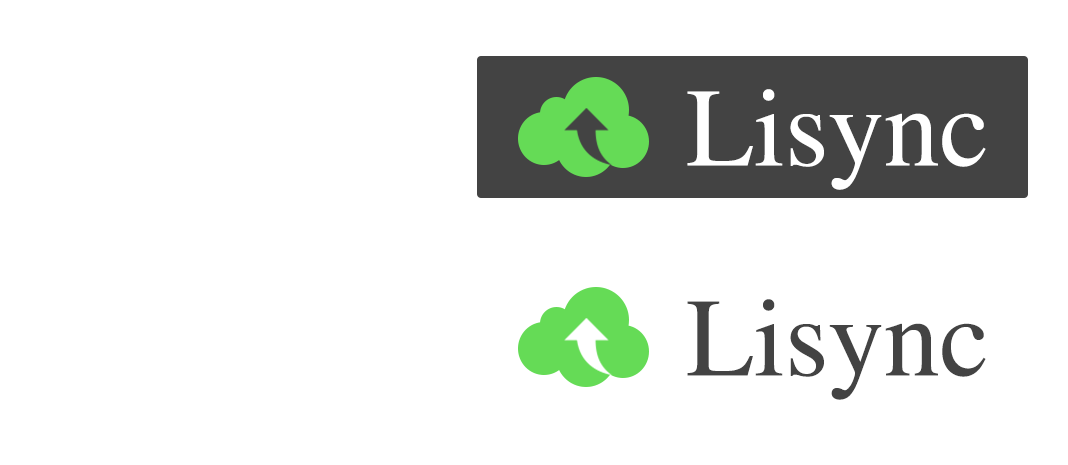
<style>
.page{position:relative;width:1068px;height:465px;background:#ffffff}
.page>*{position:absolute;margin:0}
.t1{font:111.4px "STIXGeneral-Regular";color:#ffffff}
.t2{font:111.4px "STIXGeneral-Regular";color:#434343}
</style>
<div class="page">
<p class="t1" style="left:687px;top:89px;width:299px;height:101px">Lisync</p>
<p class="t2" style="left:687px;top:299px;width:299px;height:101px">Lisync</p>
</div>
